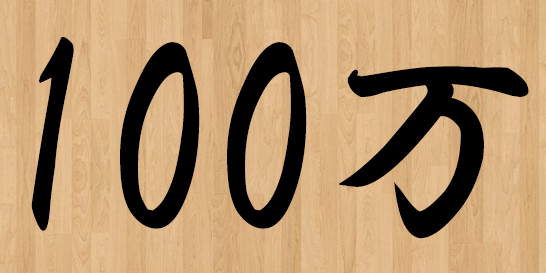
<style>
.page{position:relative;width:546px;height:273px}
.page>*{position:absolute;margin:0}
.t1{font:274.1px "HGPGyoshotai";color:#000000;scale:0.83 1}
</style>
<div class="page">
<p class="t1" style="left:31px;top:37px;width:498px;height:202px">100万</p>
</div>
